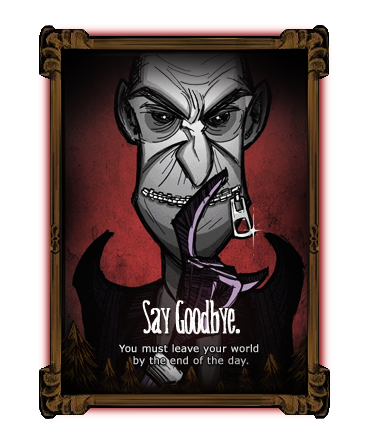
<style>
.page{position:relative;width:381px;height:445px;background:#ffffff}
.page>*{position:absolute;margin:0}
.t1{font:36px "Belisaplumillamanual";letter-spacing:-0.05em;color:#fcfcfc;font-weight:bold}
.t2{font:10px "Verdana";color:#d3d3d3;font-weight:bold}
</style>
<div class="page">
<p class="t1" style="left:142px;top:300px;width:98px;height:35px">Say Goodbye.</p>
<p class="t2" style="left:119px;top:344px;width:140px;height:23px;text-align:center">You must leave your world <br>by the end of the day.</p>
</div>
